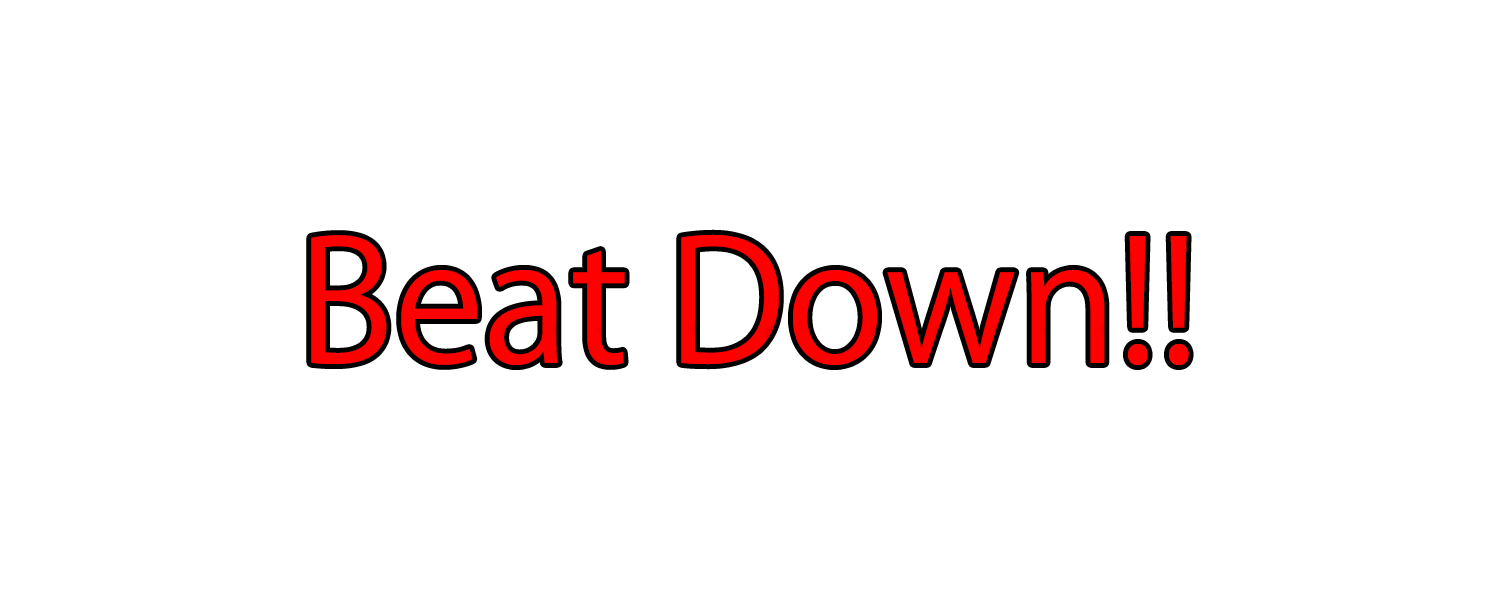
<style>
.page{position:relative;width:1500px;height:600px;background:#ffffff}
.page>*{position:absolute;margin:0}
.t1{font:166.7px "KozGoPr6N-Regular";color:#ff0000}
</style>
<div class="page">
<p class="t1" style="left:311px;top:234px;width:878px;height:131px">Beat Down!!</p>
</div>
